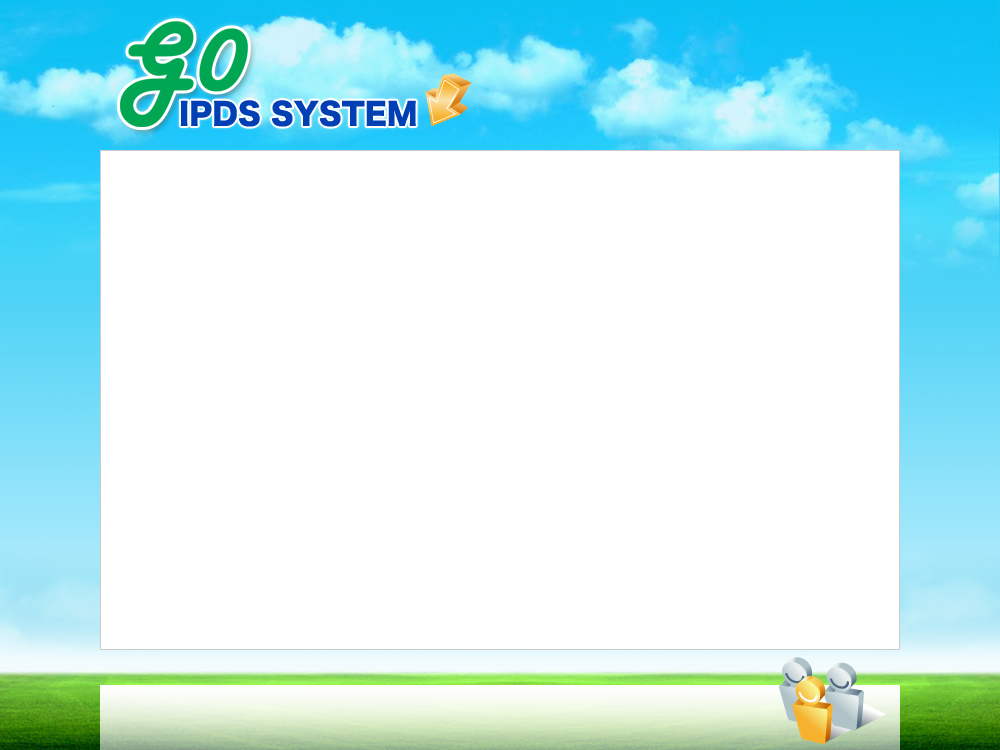
<style>
.page{position:relative;width:1000px;height:750px;background:#ffffff}
.page>*{position:absolute;margin:0}
.t1{font:30px "HiraKakuStd-W8";color:#0040b4}
</style>
<div class="page">
<p class="t1" style="left:180px;top:100px;width:236px;height:27px">IPDS SYSTEM</p>
</div>
